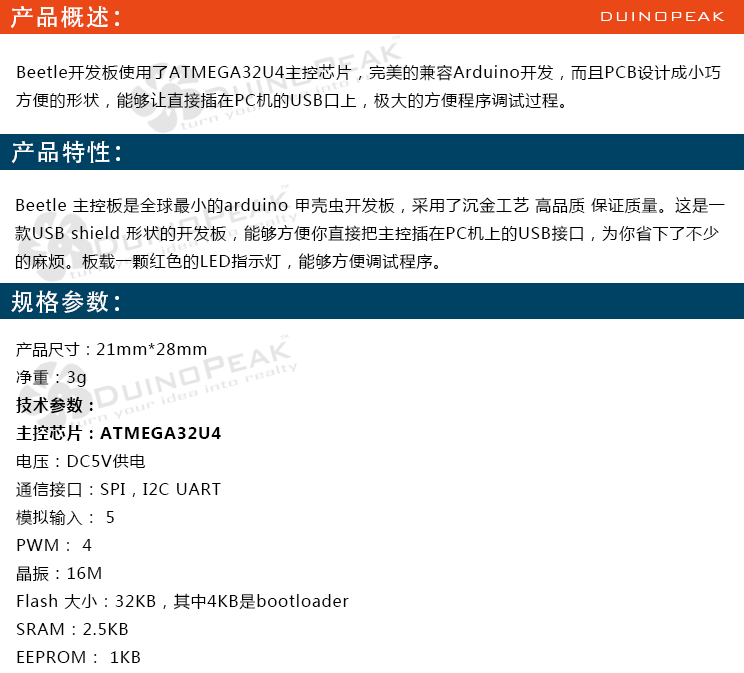
<style>
.page{position:relative;width:744px;height:673px;background:#ffffff}
.page>*{position:absolute;margin:0}
.t1{font:24px "AdobeHeitiStd-Regular";letter-spacing:0.05em;color:#ffffff}
.t2{font:18px "BankGothicBT-Light";letter-spacing:0.05em;color:#ffffff}
.t3{font:16px "MicrosoftYaHei";letter-spacing:0.05em;color:#000000}
.t4{font:16px "MicrosoftYaHei";color:#000000}
.t5{font:16px "MicrosoftYaHei-Bold";letter-spacing:0.05em;color:#000000}
</style>
<div class="page">
<p class="t1" style="left:10px;top:6px;width:109px;height:23px">产品概述：</p>
<p class="t2" style="left:601px;top:12px;width:124px;height:9px">DUINOPEAK</p>
<p class="t3" style="left:16px;top:64px;width:705px;height:45px">Beetle开发板使用了ATMEGA32U4主控芯片，完美的兼容Arduino开发，而且PCB设计成小巧<br>方便的形状，能够让直接插在PC机的USB口上，极大的方便程序调试过程。</p>
<p class="t1" style="left:11px;top:140px;width:109px;height:24px">产品特性：</p>
<p class="t3" style="left:15px;top:197px;width:710px;height:73px">Beetle 主控板是全球最小的arduino 甲壳虫开发板，采用了沉金工艺 高品质 保证质量。这是一<br>款USB shield 形状的开发板，能够方便你直接把主控插在PC机上的USB接口，为你省下了不少<br>的麻烦。板载一颗红色的LED指示灯，能够方便调试程序。</p>
<p class="t1" style="left:11px;top:290px;width:108px;height:23px">规格参数：</p>
<p class="t3" style="left:16px;top:342px;width:333px;height:321px"><span class="t4">产品尺寸：</span>21mm*28mm<br>净重：3g<br><span class="t5">技术参数：<br>主控芯片：ATMEGA32U4<br></span>电压：DC5V供电<br>通信接口：SPI，I2C UART<br>模拟输入： 5<br>PWM： 4<br>晶振：16M<br>Flash 大小：32KB，其中4KB是bootloader<br>SRAM：2.5KB<br>EEPROM： 1KB</p>
</div>
